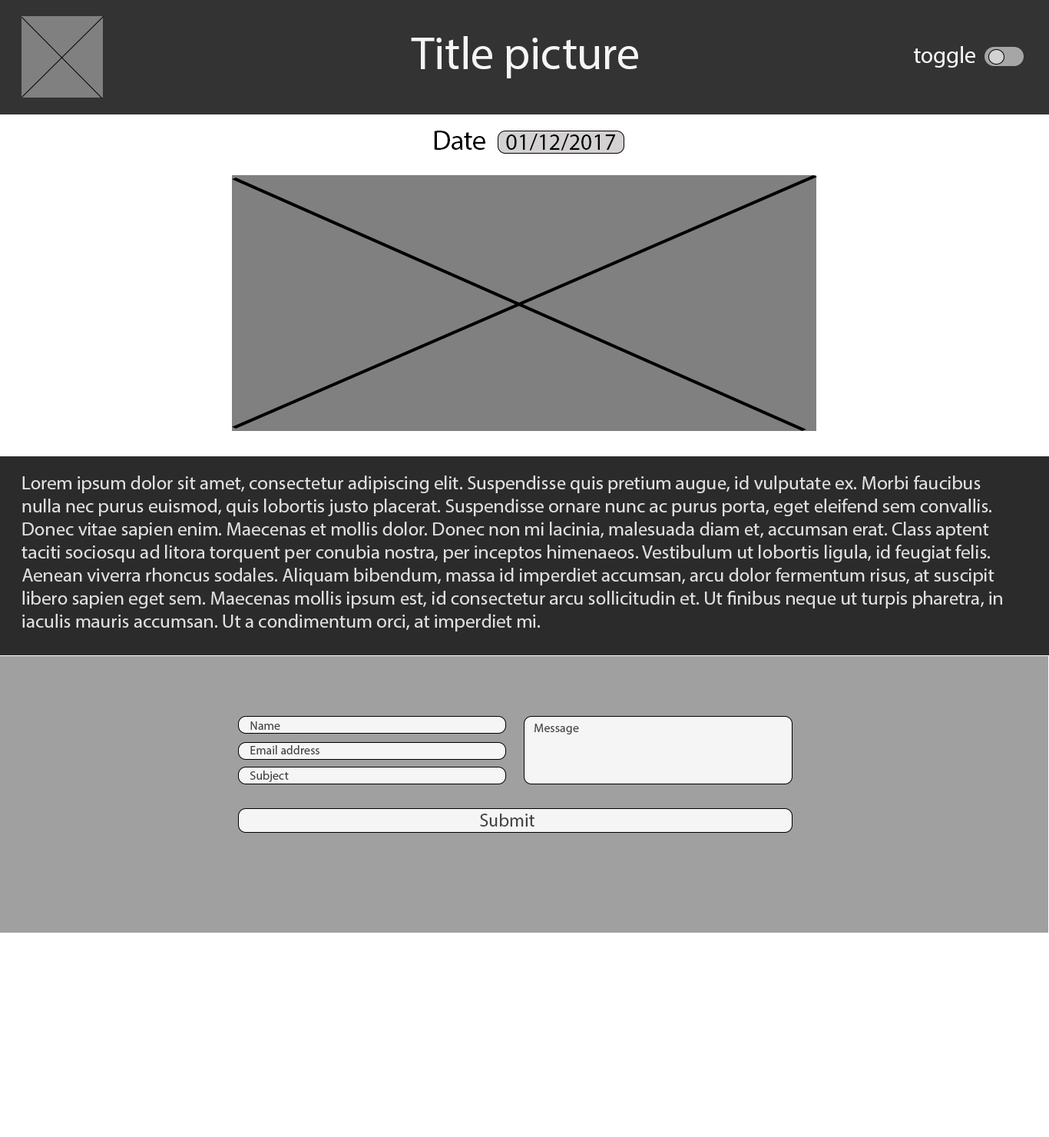
<style>
.page{position:relative;width:1049px;height:1137px;background:#ffffff}
.page>*{position:absolute;margin:0}
.t1{font:46.1px "MyriadPro-Regular";color:#f5f5f5}
.t2{font:23px "MyriadPro-Regular";color:#f5f5f5}
.t3{font:27.6px "MyriadPro-Regular";color:#000000}
.t4{font:23px "MyriadPro-Regular";color:#000000}
.t5{font:19.2px "MyriadPro-Regular";color:#dfdfdf}
.t6{font:12.3px "MyriadPro-Regular";color:#454545}
.t7{font:18.4px "MyriadPro-Regular";color:#454545}
</style>
<div class="page">
<p class="t1" style="left:411px;top:36px;width:227px;height:42px">Title picture</p>
<p class="t2" style="left:914px;top:46px;width:61px;height:22px">toggle</p>
<p class="t3" style="left:434px;top:131px;width:51px;height:19px">Date</p>
<p class="t4" style="left:506px;top:134px;width:109px;height:17px">01/12/2017</p>
<p class="t5" style="left:22px;top:475px;width:980px;height:156px">Lorem ipsum dolor sit amet, consectetur adipiscing elit. Suspendisse quis pretium augue, id vulputate ex. Morbi faucibus nulla nec purus euismod, quis lobortis justo placerat. Suspendisse ornare nunc ac purus porta, eget eleifend sem convallis. Donec vitae sapien enim. Maecenas et mollis dolor. Donec non mi lacinia, malesuada diam et, accumsan erat. Class aptent taciti sociosqu ad litora torquent per conubia nostra, per inceptos himenaeos. Vestibulum ut lobortis ligula, id feugiat felis. Aenean viverra rhoncus sodales. Aliquam bibendum, massa id imperdiet accumsan, arcu dolor fermentum risus, at suscipit libero sapien eget sem. Maecenas mollis ipsum est, id consectetur arcu sollicitudin et. Ut finibus neque ut turpis pharetra, in iaculis mauris accumsan. Ut a condimentum orci, at imperdiet mi.</p>
<p class="t6" style="left:250px;top:721px;width:30px;height:9px">Name</p>
<p class="t6" style="left:535px;top:723px;width:44px;height:11px">Message</p>
<p class="t6" style="left:250px;top:745px;width:69px;height:9px">Email address</p>
<p class="t6" style="left:250px;top:770px;width:39px;height:12px">Subject</p>
<p class="t7" style="left:480px;top:813px;width:55px;height:13px">Submit</p>
</div>
